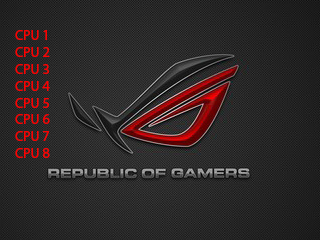
<style>
.page{position:relative;width:320px;height:240px}
.page>*{position:absolute;margin:0}
.t1{font:14px "MyriadPro-Regular";color:#fe0000}
</style>
<div class="page">
<p class="t1" style="left:15px;top:30px;width:35px;height:128px">CPU 1<br>CPU 2<br>CPU 3<br>CPU 4<br>CPU 5<br>CPU 6<br>CPU 7<br>CPU 8</p>
</div>
